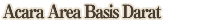
<style>
.page{position:relative;width:204px;height:22px;background:#ffffff}
.page>*{position:absolute;margin:0}
.t1{font:18px "RyuminPro-ExBold";letter-spacing:-0.08em;color:#534738;scale:0.9 1}
</style>
<div class="page">
<p class="t1" style="left:2px;top:4px;width:160px;height:15px">Acara Area Basis Darat</p>
</div>
